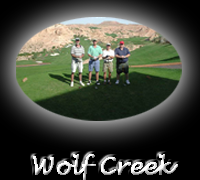
<style>
.page{position:relative;width:200px;height:180px}
.page>*{position:absolute;margin:0}
.t1{font:22.3px "LucidaHandwriting-Italic";font-weight:bold}
</style>
<div class="page">
<p class="t1" style="left:33px;top:154px;width:145px;height:26px">Wolf Creek</p>
</div>
